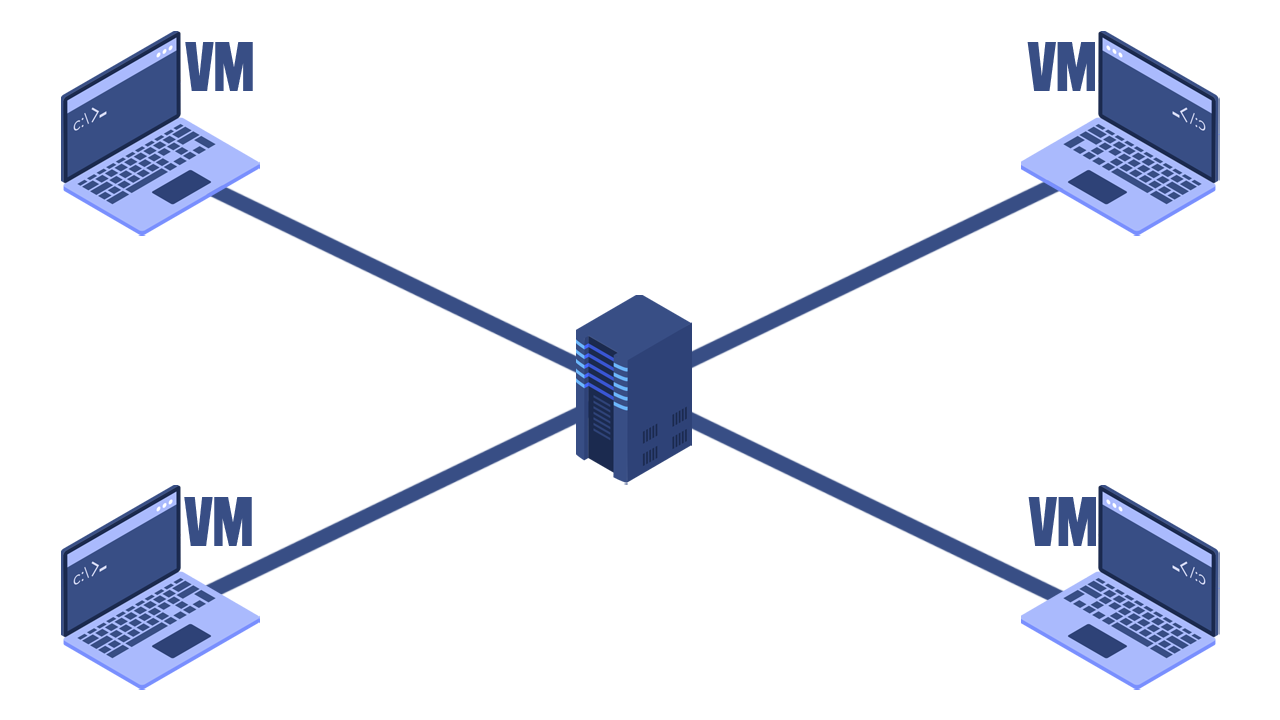
<style>
.page{position:relative;width:1280px;height:720px;background:#ffffff}
.page>*{position:absolute;margin:0}
.t1{font:70px "Haettenschweiler";color:#384e85}
</style>
<div class="page">
<p class="t1" style="left:185px;top:42px;width:68px;height:49px">VM</p>
<p class="t1" style="left:1027px;top:42px;width:68px;height:49px;rotate:180deg">MV</p>
<p class="t1" style="left:184px;top:497px;width:68px;height:49px">VM</p>
<p class="t1" style="left:1028px;top:497px;width:68px;height:49px;rotate:180deg">MV</p>
</div>
